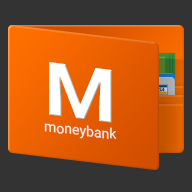
<style>
.page{position:relative;width:192px;height:192px;background:#333333}
.page>*{position:absolute;margin:0}
.t1{font:73.9px "Roboto-Bold";color:#ffffff;scale:1.14 1}
.t2{font:14px "Roboto-Regular";color:#ffffff}
</style>
<div class="page">
<p class="t1" style="left:49px;top:62px;width:63px;height:61px;rotate:7deg">M</p>
<p class="t2" style="left:44px;top:123px;width:73px;height:16px;rotate:6deg;opacity:0.86">moneybank</p>
</div>
